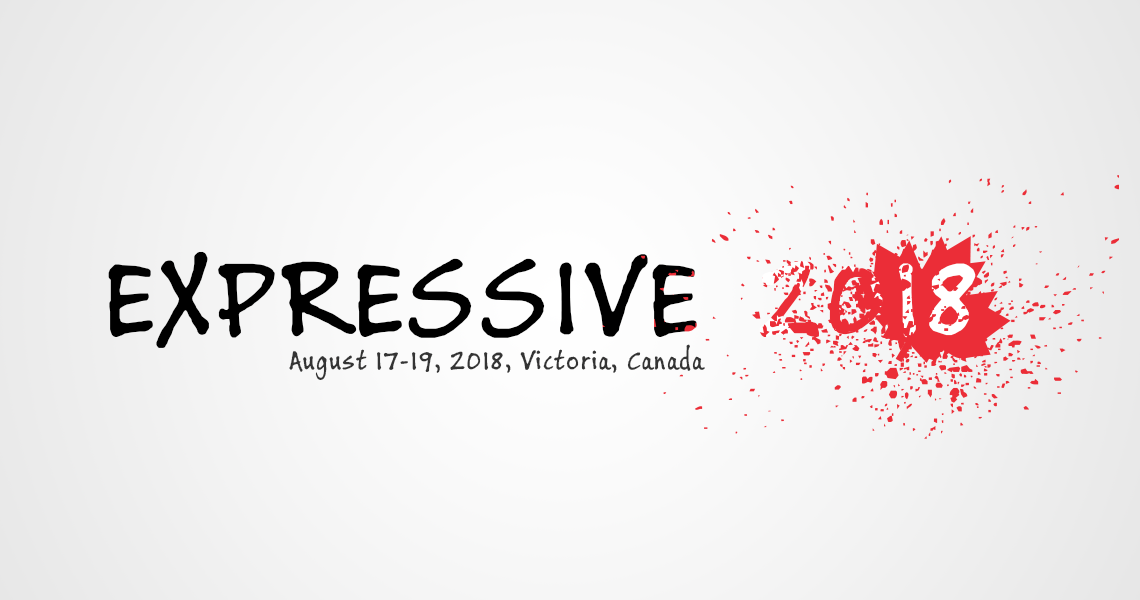
<style>
.page{position:relative;width:1140px;height:600px}
.page>*{position:absolute;margin:0}
.t1{font:118.6px "BuxtonSketch";letter-spacing:0.05em;color:#000000}
.t2{font:118.6px "BuxtonSketch";letter-spacing:0.05em;color:#ffffff}
.t3{font:28.5px "BuxtonSketch";letter-spacing:0.05em;color:#343434}
</style>
<div class="page">
<p class="t1" style="left:108px;top:251px;width:868px;height:97px">EXPRESSIVE  <span class="t2">2018</span></p>
<p class="t3" style="left:289px;top:344px;width:416px;height:36px">August 17-19, 2018, Victoria, Canada</p>
</div>
